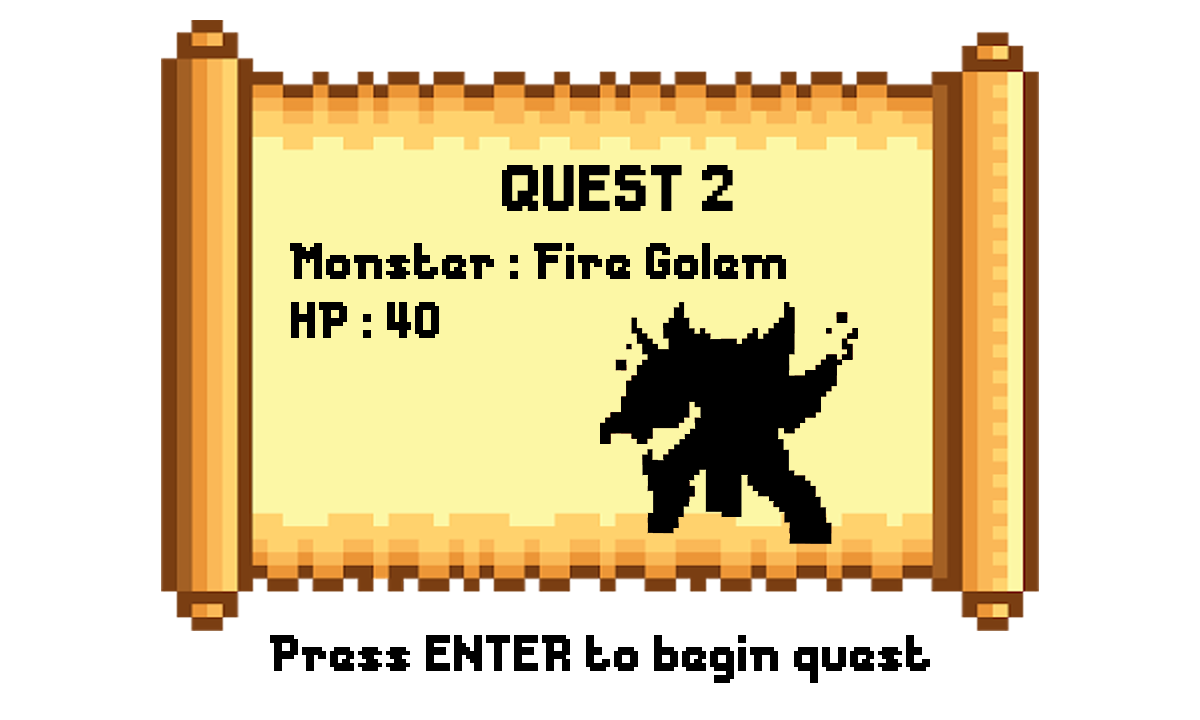
<style>
.page{position:relative;width:1200px;height:720px;background:#ffffff}
.page>*{position:absolute;margin:0}
.t1{font:61.3px "Messe-Duesseldorf";color:#000000}
.t2{font:48px "Messe-Duesseldorf";color:#000000}
</style>
<div class="page">
<p class="t1" style="left:502px;top:165px;width:231px;height:46px">QUEST 2</p>
<p class="t2" style="left:290px;top:243px;width:496px;height:36px">Monster : Fire Golem</p>
<p class="t2" style="left:291px;top:302px;width:148px;height:36px">HP : 40</p>
<p class="t2" style="left:270px;top:635px;width:660px;height:48px">Press ENTER to begin quest</p>
</div>
